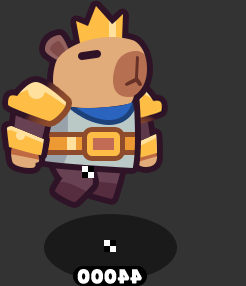
<style>
.page{position:relative;width:246px;height:286px;background:#333333}
.page>*{position:absolute;margin:0}
.t1{font:20px "LilitaOne";color:#ffffff;font-weight:bold}
</style>
<div class="page">
<p class="t1" style="left:77px;top:269px;width:65px;height:15px;rotate:180deg">44000</p>
</div>
